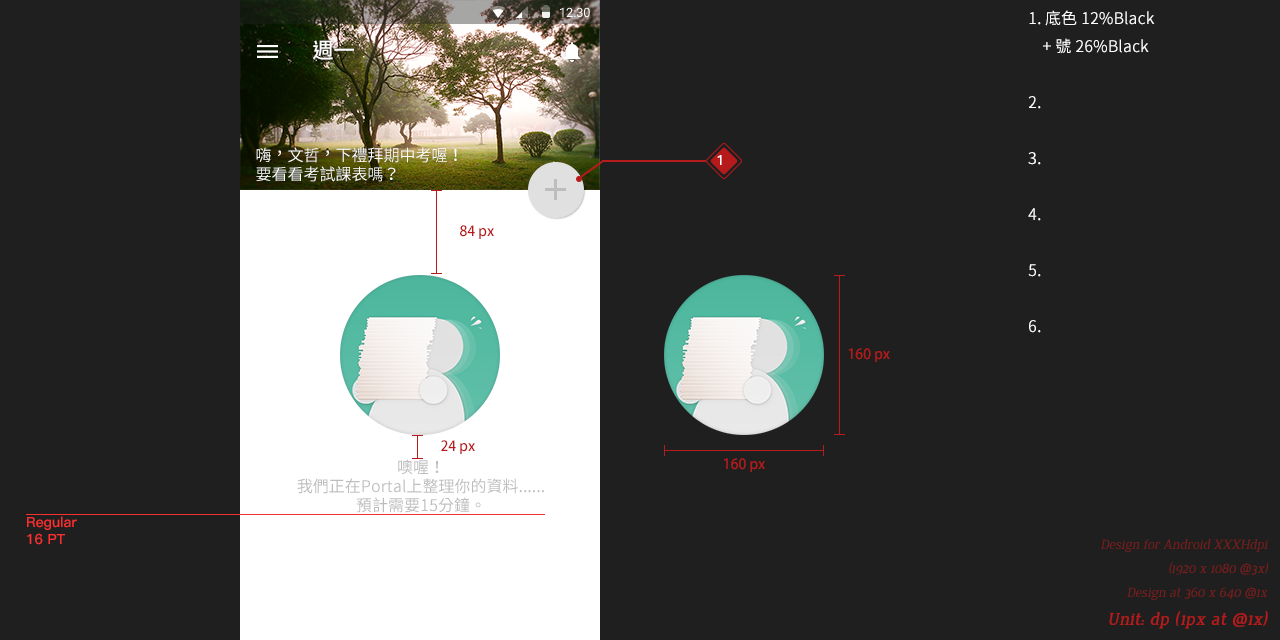
<style>
.page{position:relative;width:1280px;height:640px;background:#1f1f1f}
.page>*{position:absolute;margin:0}
.t1{font:12.7px "Roboto-Regular";color:#ffffff}
.t2{font:16px "SourceHanSansTWHK-Regular";color:#ffffff}
.t3{font:21.3px "SourceHanSansTWHK-Medium";color:#ffffff}
.t4{font:16px "SourceHanSansTWHK-Normal";color:#ffffff}
.t5{font:14px "PingFang-SC-Bold";color:#ffffff}
.t6{font:14px "AdobeFanHeitiStd-Bold";color:#b71a1a}
.t7{font:16px "SourceHanSansTWHK-Regular";color:#bdbdbd}
.t8{font:14px "PingFang-SC-Bold";color:#f83030}
.t9{font:14px "Jura-Italic";color:#7b1d1d}
.t10{font:18px "Jura-BoldItalic";color:#b71a1a}
</style>
<div class="page">
<p class="t1" style="left:560px;top:7px;width:30px;height:10px">12:30</p>
<p class="t2" style="left:1028px;top:10px;width:127px;height:323px">1. 底色12%Black <br>    +號26%Black<br><br>2.<br><br>3.<br><br>4.<br><br>5.<br><br>6.</p>
<p class="t3" style="left:313px;top:40px;width:41px;height:20px">週一</p>
<p class="t4" style="left:256px;top:147px;width:201px;height:35px">嗨，文哲，下禮拜期中考喔！<br>要看看考試課表嗎？</p>
<p class="t5" style="left:717px;top:155px;width:5px;height:10px">1</p>
<p class="t6" style="left:460px;top:225px;width:34px;height:14px">84 px</p>
<p class="t6" style="left:848px;top:348px;width:42px;height:14px">160 px</p>
<p class="t6" style="left:441px;top:440px;width:34px;height:14px">24 px</p>
<p class="t7" style="left:297px;top:459px;width:247px;height:54px;text-align:center">噢喔！<br>我們正在Portal上整理你的資料......<br>預計需要15分鐘。</p>
<p class="t6" style="left:724px;top:458px;width:41px;height:14px">160 px</p>
<p class="t8" style="left:27px;top:516px;width:50px;height:29px">Regular<br>16 PT</p>
<p class="t9" style="left:1101px;top:539px;width:167px;height:36px;text-align:right">Design for Android XXXHdpi<br>(1920 x 1080 @3x)</p>
<p class="t9" style="left:1127px;top:587px;width:141px;height:13px">Design at 360 x 640 @1x</p>
<p class="t10" style="left:1109px;top:611px;width:159px;height:18px">Unit: dp (1px at @1x)</p>
</div>
